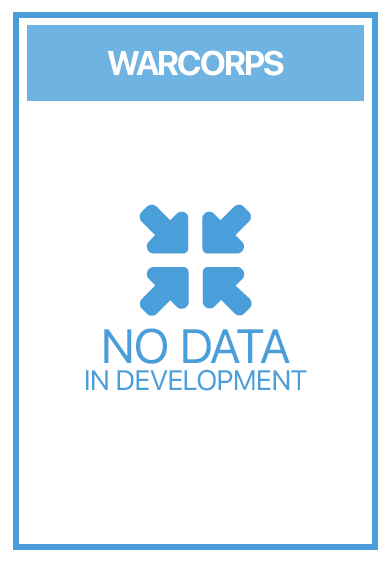
<style>
.page{position:relative;width:391px;height:562px;background:#ffffff}
.page>*{position:absolute;margin:0}
.t1{font:34px "SFProDisplay-Bold";letter-spacing:-0.05em;color:#ffffff;text-transform:uppercase}
.t2{font:28px/27px "SFUIText-Regular";letter-spacing:-0.05em;color:#4aa0db;text-transform:uppercase}
.t3{font:48px/29px "SFUIText-Regular";letter-spacing:-0.05em;color:#4aa0db;text-transform:uppercase}
</style>
<div class="page">
<p class="t1" style="left:107px;top:50px;width:177px;height:26px">warcorps</p>
<p class="t2" style="left:86px;top:328px;width:221px;height:63px;text-align:center"><span class="t3">no data<br></span>in Development</p>
</div>
